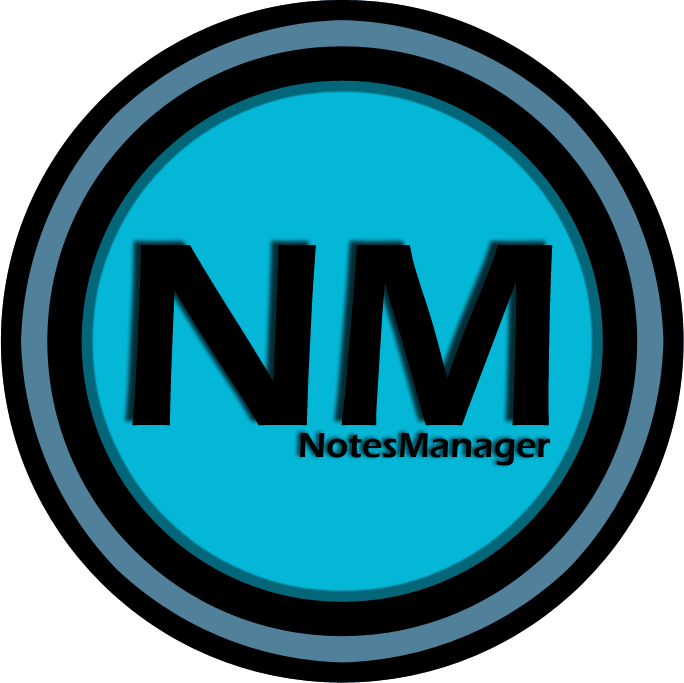
<style>
.page{position:relative;width:684px;height:683px;background:#000000}
.page>*{position:absolute;margin:0}
.t1{font:270px "ErasITC-Demi";color:#000000}
.t2{font:36px "ErasITC-Demi";color:#000000}
</style>
<div class="page">
<p class="t1" style="left:132px;top:245px;width:421px;height:181px">NM</p>
<p class="t2" style="left:300px;top:433px;width:251px;height:33px">NotesManager</p>
</div>
